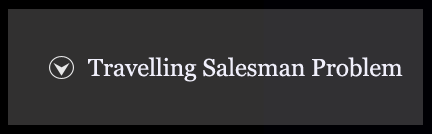
<style>
.page{position:relative;width:432px;height:134px;background:#313030}
.page>*{position:absolute;margin:0}
.t1{font:24.5px "Georgia";letter-spacing:-0.005em;color:#f0effb}
</style>
<div class="page">
<p class="t1" style="left:88px;top:57px;width:315px;height:25px">Travelling Salesman Problem</p>
</div>
